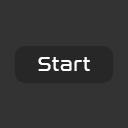
<style>
.page{position:relative;width:128px;height:128px;background:#333333}
.page>*{position:absolute;margin:0}
.t1{font:20.6px "NasalizationRg-Regular";color:#ffffff}
</style>
<div class="page">
<p class="t1" style="left:38px;top:57px;width:52px;height:14px">Start</p>
</div>
